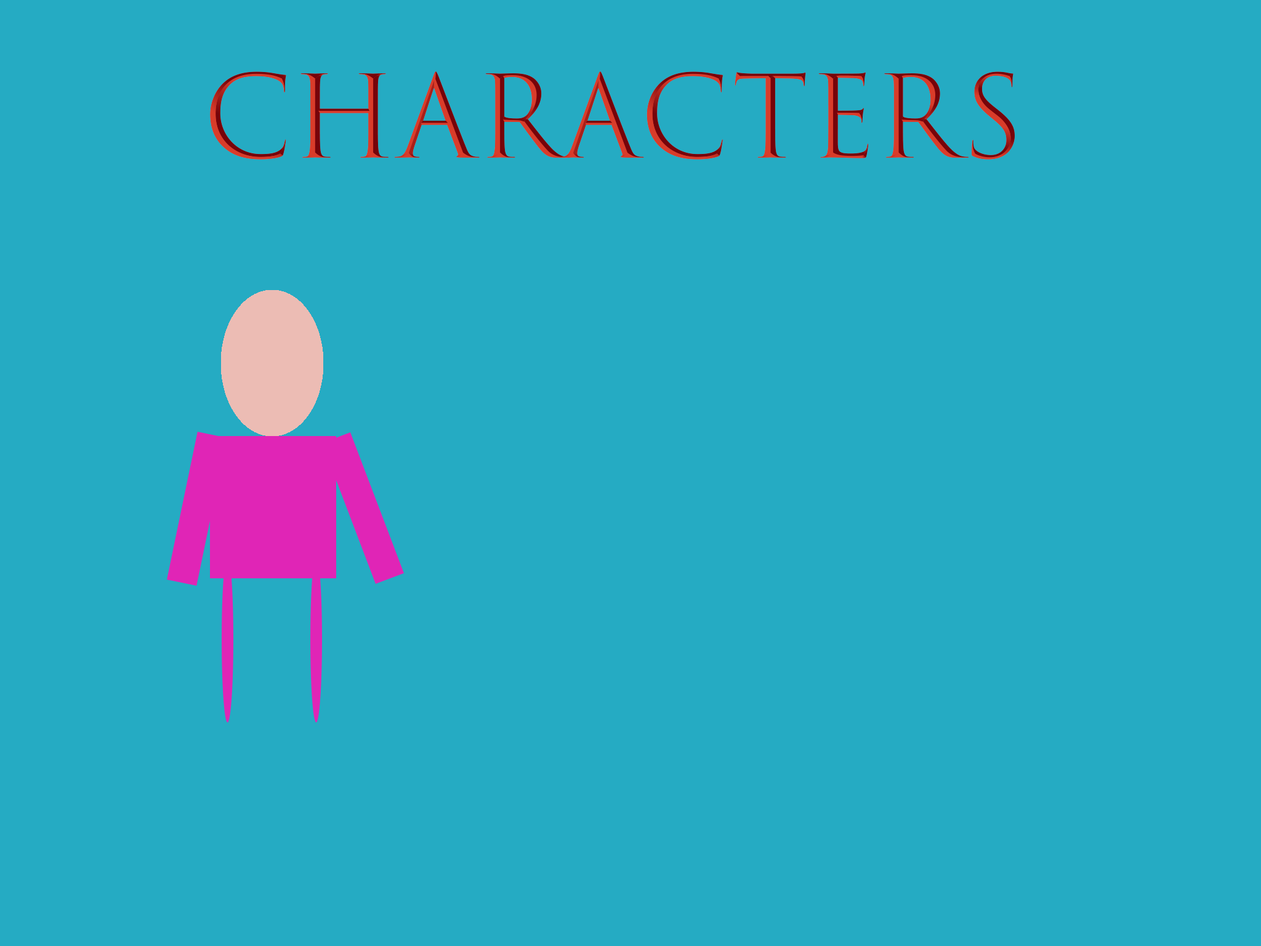
<style>
.page{position:relative;width:1261px;height:946px;background:#25abc3}
.page>*{position:absolute;margin:0}
.t1{font:111.5px "TrajanColor-Concept"}
</style>
<div class="page">
<p class="t1" style="left:210px;top:71px;width:805px;height:88px">CHARACTERS</p>
</div>
